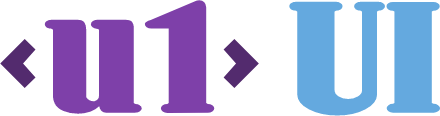
<style>
.page{position:relative;width:440px;height:116px;background:#ffffff}
.page>*{position:absolute;margin:0}
.t1{font:150px "WoodenNickelBlack";color:#7e40a9}
.t2{font:150px "WoodenNickelBlack";color:#532b6e}
.t3{font:150px "WoodenNickelBlack";color:#64a9df}
</style>
<div class="page">
<p class="t1" style="left:0px;top:0px;width:441px;height:116px"><span class="t2">&lt;</span>u1<span class="t2">&gt; </span><span class="t3">UI</span></p>
</div>
